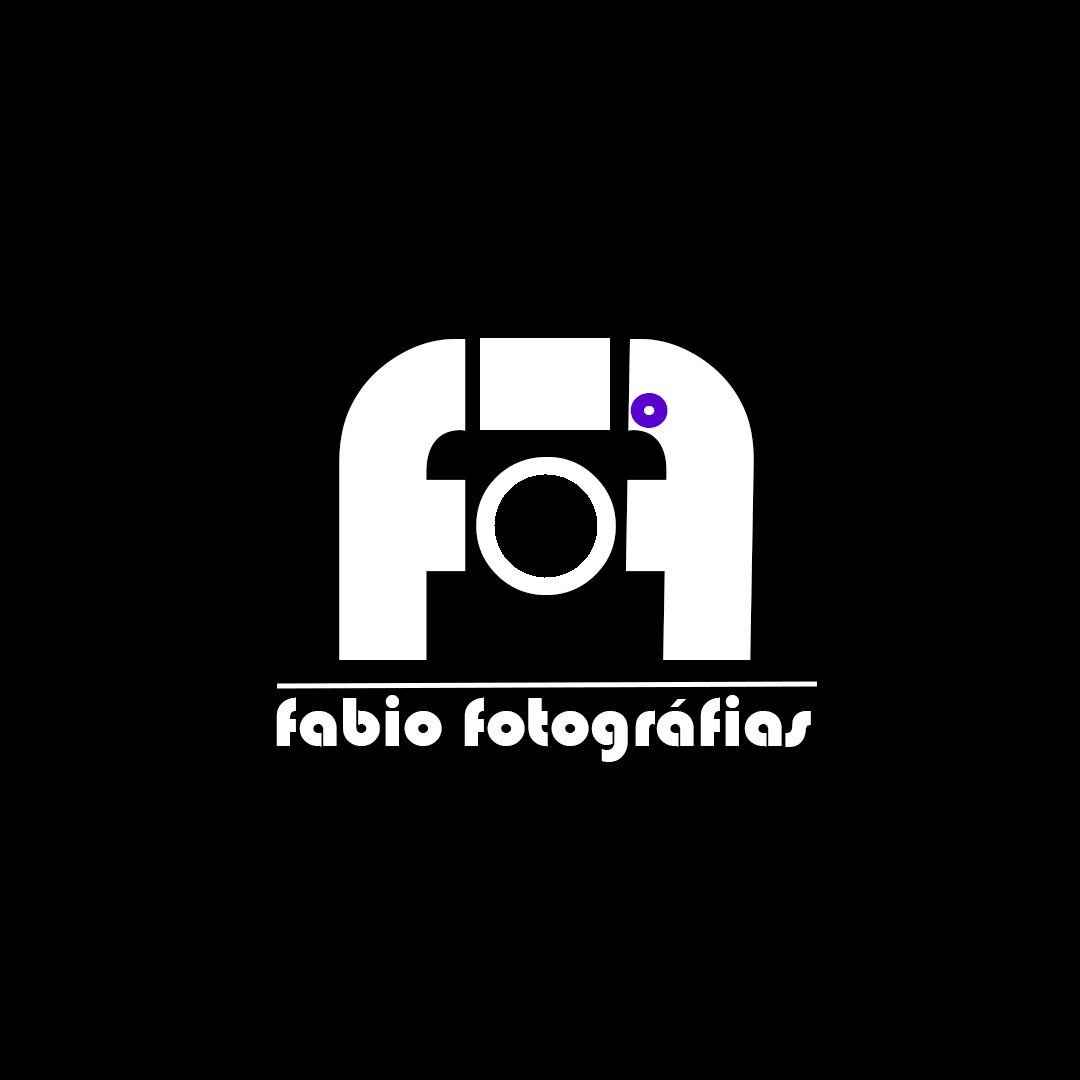
<style>
.page{position:relative;width:1080px;height:1080px;background:#000000}
.page>*{position:absolute;margin:0}
.t1{font:475.3px "Bauhaus93";color:#ffffff}
.t2{font:475.4px "Bauhaus93";color:#ffffff}
.t3{font:72px "Bauhaus93";color:#5902ce}
.t4{font:272.3px "Bauhaus93"}
.t5{font:72px "Bauhaus93";color:#ffffff}
</style>
<div class="page">
<p class="t1" style="left:339px;top:338px;width:127px;height:322px">f</p>
<p class="t2" style="left:625px;top:338px;width:129px;height:322px;rotate:-180deg">f</p>
<p class="t3" style="left:630px;top:393px;width:38px;height:35px">o</p>
<p class="t4" style="left:476px;top:456px;width:140px;height:139px">o</p>
<p class="t5" style="left:276px;top:695px;width:535px;height:67px">fabio fotográfias</p>
</div>
